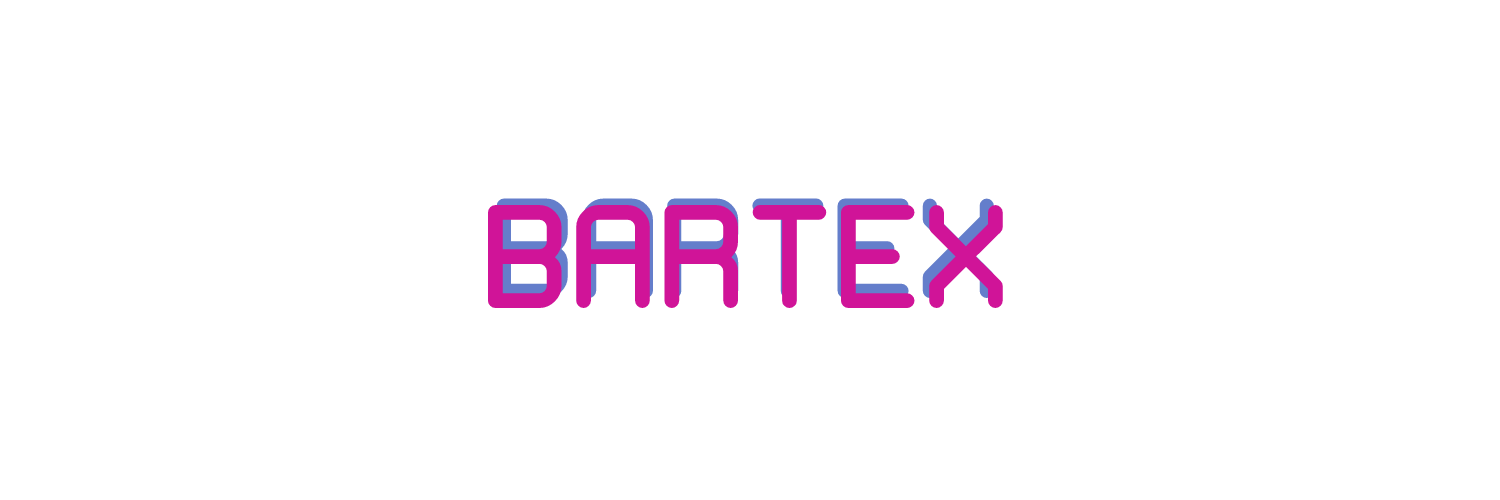
<style>
.page{position:relative;width:1500px;height:500px;background:#ffffff}
.page>*{position:absolute;margin:0}
.t1{font:149.1px "WhiteRabbit"}
.t2{font:154.4px "WhiteRabbit";color:#d01498}
</style>
<div class="page">
<p class="t1" style="left:496px;top:198px;width:498px;height:100px">BARTEX</p>
<p class="t2" style="left:487px;top:205px;width:516px;height:103px">BARTEX</p>
</div>
